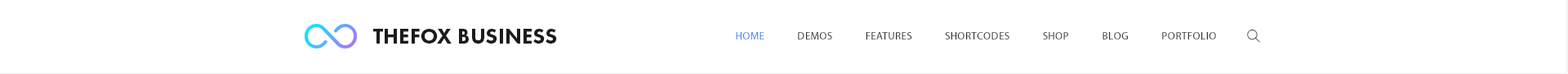
<style>
.page{position:relative;width:1568px;height:74px;background:#ffffff}
.page>*{position:absolute;margin:0}
.t1{font:22.1px "FuturaPT-Heavy";color:#1c1c1c;text-transform:uppercase}
.t2{font:10.6px "MyriadPro-Regular";letter-spacing:0.05em;color:#333333;text-transform:uppercase}
.t3{font:10.6px "MyriadPro-Regular";letter-spacing:0.05em;color:#4285f4;text-transform:uppercase}
</style>
<div class="page">
<p class="t1" style="left:373px;top:29px;width:184px;height:14px">thefox business</p>
<p class="t2" style="left:736px;top:32px;width:480px;height:7px"><span class="t3">home</span>           demos           features           shortcodes           shop           blog           portfolio</p>
</div>
